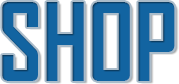
<style>
.page{position:relative;width:179px;height:84px;background:#1264a1}
.page>*{position:absolute;margin:0}
.t1{font:103.2px "AgencyFB-Bold";color:#1264a1;scale:0.94 1}
</style>
<div class="page">
<p class="t1" style="left:2px;top:2px;width:173px;height:79px">SHOP</p>
</div>
